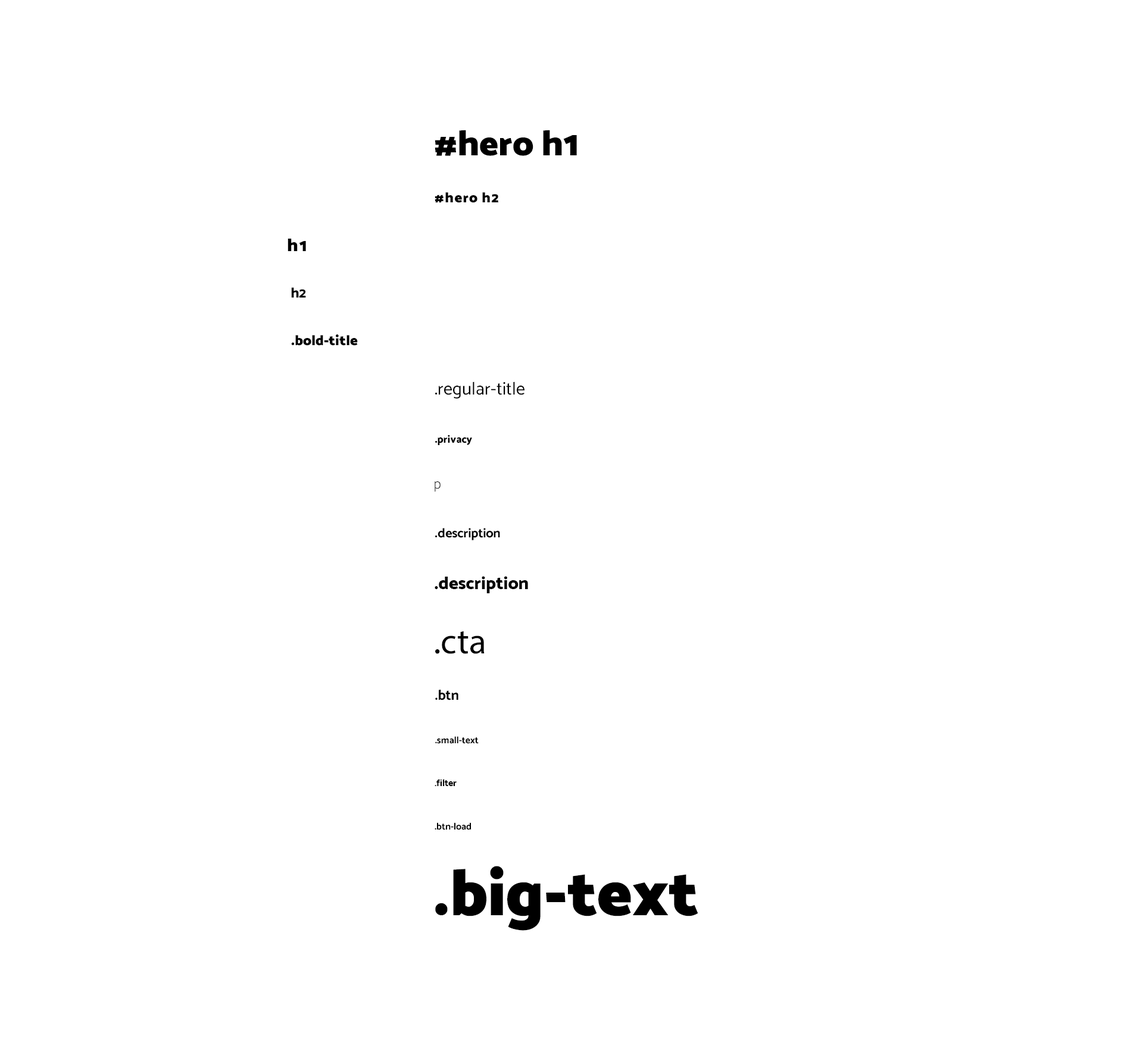
<style>
.page{position:relative;width:1124px;height:1061px;background:#ffffff}
.page>*{position:absolute;margin:0}
.t1{font:35.7px "Catamaran-Black";color:#000000}
.t2{font:14.3px "Catamaran-Black";letter-spacing:0.05em;color:#000000}
.t3{font:17.9px "Catamaran-Black";letter-spacing:0.05em;color:#000000}
.t4{font:14.3px "Catamaran-ExtraBold";color:#000000}
.t5{font:14.3px "Catamaran-Black";color:#000000}
.t6{font:17.9px "Catamaran-Regular";color:#000000}
.t7{font:10.7px "Catamaran-ExtraBold";color:#000000}
.t8{font:14.3px "Catamaran-ExtraLight";color:#000000}
.t9{font:13.1px "Catamaran-Bold";color:#000000}
.t10{font:17.9px "Catamaran-ExtraBold";color:#000000}
.t11{font:35.7px "MyriadPro-Regular";color:#000000}
.t12{font:14.3px "Catamaran-Bold";color:#000000}
.t13{font:9.5px "Catamaran-Bold";color:#000000}
.t14{font:65.5px "Catamaran-Black";color:#000000}
</style>
<div class="page">
<p class="t1" style="left:434px;top:130px;width:143px;height:26px">#hero h1</p>
<p class="t2" style="left:434px;top:192px;width:64px;height:11px">#hero h2</p>
<p class="t3" style="left:287px;top:239px;width:19px;height:12px">h1</p>
<p class="t4" style="left:291px;top:287px;width:15px;height:11px">h2</p>
<p class="t5" style="left:291px;top:334px;width:67px;height:12px">.bold-title</p>
<p class="t6" style="left:435px;top:382px;width:89px;height:17px">.regular-title</p>
<p class="t7" style="left:435px;top:435px;width:37px;height:10px">.privacy</p>
<p class="t8" style="left:434px;top:481px;width:6px;height:11px">p</p>
<p class="t9" style="left:435px;top:528px;width:65px;height:12px">.description</p>
<p class="t10" style="left:434px;top:576px;width:94px;height:17px">.description</p>
<p class="t11" style="left:435px;top:631px;width:49px;height:23px">.cta</p>
<p class="t12" style="left:435px;top:690px;width:23px;height:11px">.btn</p>
<p class="t13" style="left:435px;top:736px;width:44px;height:8px">.small-text</p>
<p class="t13" style="left:434px;top:779px;width:22px;height:7px">.filter</p>
<p class="t13" style="left:434px;top:823px;width:37px;height:7px">.btn-load</p>
<p class="t14" style="left:435px;top:866px;width:263px;height:65px">.big-text</p>
</div>
